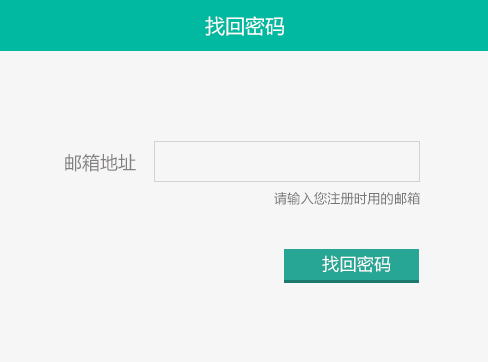
<style>
.page{position:relative;width:488px;height:362px;background:#f6f6f6}
.page>*{position:absolute;margin:0}
.t1{font:20px "MicrosoftYaHei";color:#ffffff}
.t2{font:18px "MicrosoftYaHei";color:#838080}
.t3{font:13px "MicrosoftYaHei";letter-spacing:0.025em;color:#757373}
.t4{font:17px "MicrosoftYaHei";letter-spacing:0.025em;color:#ffffff}
</style>
<div class="page">
<p class="t1" style="left:205px;top:16px;width:79px;height:20px">找回密码</p>
<p class="t2" style="left:65px;top:154px;width:71px;height:18px">邮箱地址</p>
<p class="t3" style="left:274px;top:192px;width:146px;height:13px">请输入您注册时用的邮箱</p>
<p class="t4" style="left:322px;top:255px;width:69px;height:18px">找回密码</p>
</div>
